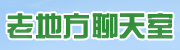
<style>
.page{position:relative;width:180px;height:50px}
.page>*{position:absolute;margin:0}
.t1{font:28px "BDZYJT--GB1-0";color:#2d8b35}
</style>
<div class="page">
<p class="t1" style="left:7px;top:13px;width:166px;height:26px">老地方聊天室</p>
</div>
